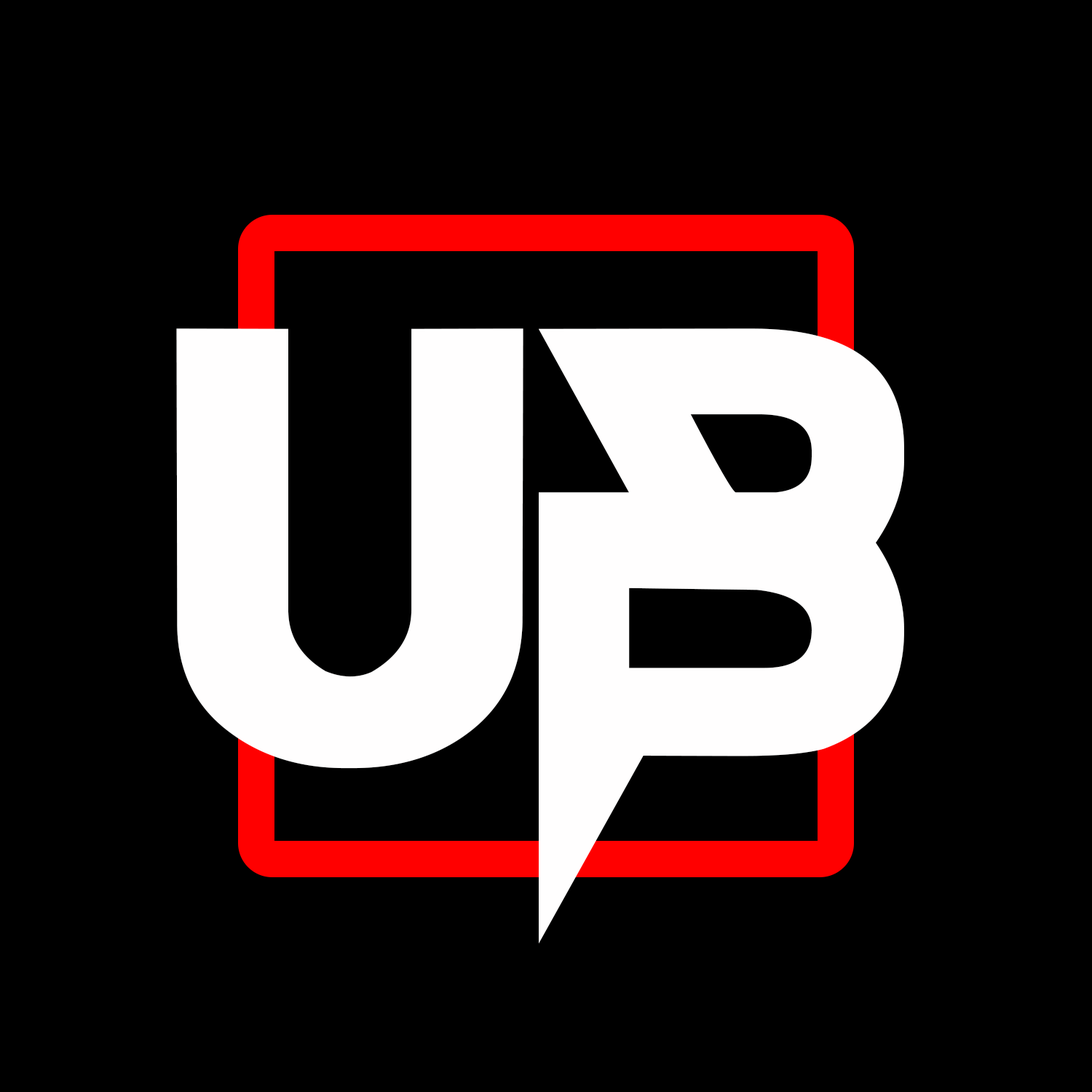
<style>
.page{position:relative;width:1092px;height:1092px;background:#000000}
.page>*{position:absolute;margin:0}
.t1{font:606.7px "BlackStarFJNTBYLYAJKA";color:#fffefe;text-transform:uppercase}
</style>
<div class="page">
<p class="t1" style="left:176px;top:328px;width:728px;height:615px">UB</p>
</div>
